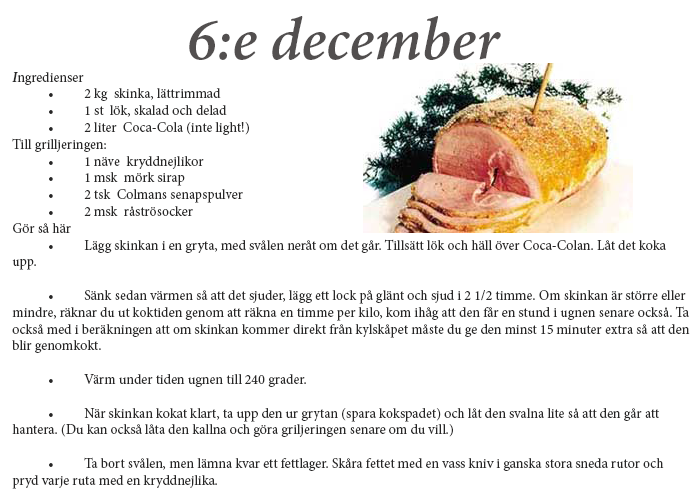
<style>
.page{position:relative;width:700px;height:500px;background:#ffffff}
.page>*{position:absolute;margin:0}
.t1{font:60px "MinionPro-SemiboldIt";color:#524f4f}
.t2{font:14px "MinionPro-Regular";color:#272626}
.t3{font:14px "MinionPro-SemiboldIt";color:#272626}
</style>
<div class="page">
<p class="t1" style="left:189px;top:16px;width:312px;height:44px">6:e december</p>
<p class="t2" style="left:12px;top:72px;width:678px;height:417px"><span class="t3">I</span>ngredienser<br> • 2 kg  skinka, lättrimmad<br> • 1 st  lök, skalad och delad<br> • 2 liter  Coca-Cola (inte light!)<br>Till grilljeringen:<br> • 1 näve  kryddnejlikor<br> • 1 msk  mörk sirap<br> • 2 tsk  Colmans senapspulver<br> • 2 msk  råströsocker<br>Gör så här<br> • Lägg skinkan i en gryta, med svålen neråt om det går. Tillsätt lök och häll över Coca-Colan. Låt det koka upp. <br><br> • Sänk sedan värmen så att det sjuder, lägg ett lock på glänt och sjud i 2 1/2 timme. Om skinkan är större eller mindre, räknar du ut koktiden genom att räkna en timme per kilo, kom ihåg att den får en stund i ugnen senare också. Ta också med i beräkningen att om skinkan kommer direkt från kylskåpet måste du ge den minst 15 minuter extra så att den blir genomkokt. <br><br> • Värm under tiden ugnen till 240 grader. <br><br> • När skinkan kokat klart, ta upp den ur grytan (spara kokspadet) och låt den svalna lite så att den går att hantera. (Du kan också låta den kallna och göra griljeringen senare om du vill.) <br><br> • Ta bort svålen, men lämna kvar ett fettlager. Skåra fettet med en vass kniv i ganska stora sneda rutor och pryd varje ruta med en kryddnejlika.</p>
</div>
